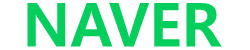
<style>
.page{position:relative;width:250px;height:50px;background:#ffffff}
.page>*{position:absolute;margin:0}
.t1{font:60px "MalgunGothicBold";color:#04cf5c}
</style>
<div class="page">
<p class="t1" style="left:27px;top:3px;width:195px;height:44px">NAVER</p>
</div>
